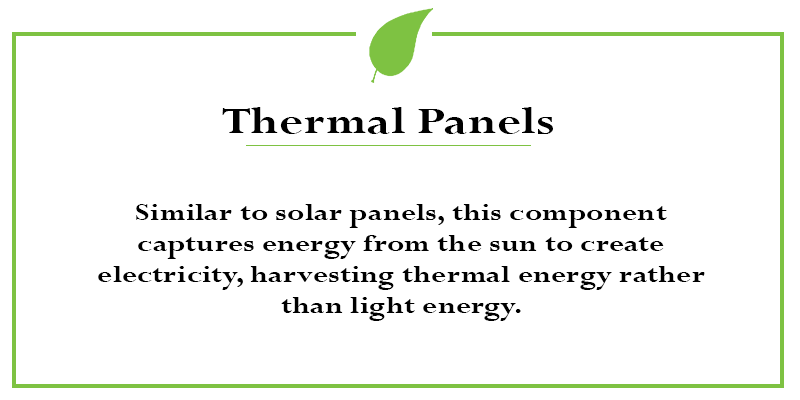
<style>
.page{position:relative;width:800px;height:400px;background:#ffffff}
.page>*{position:absolute;margin:0}
.t1{font:40.8px "Perpetua-Bold";color:#000000;scale:1.26 1}
.t2{font:25.6px "Perpetua-Bold";color:#000000;scale:1.26 1}
</style>
<div class="page">
<p class="t1" style="left:222px;top:107px;width:331px;height:27px">Thermal Panels</p>
<p class="t2" style="left:98px;top:204px;width:607px;height:117px;text-align:center">Similar to solar panels, this component captures energy from the sun to create electricity, harvesting thermal energy rather than light energy.</p>
</div>
